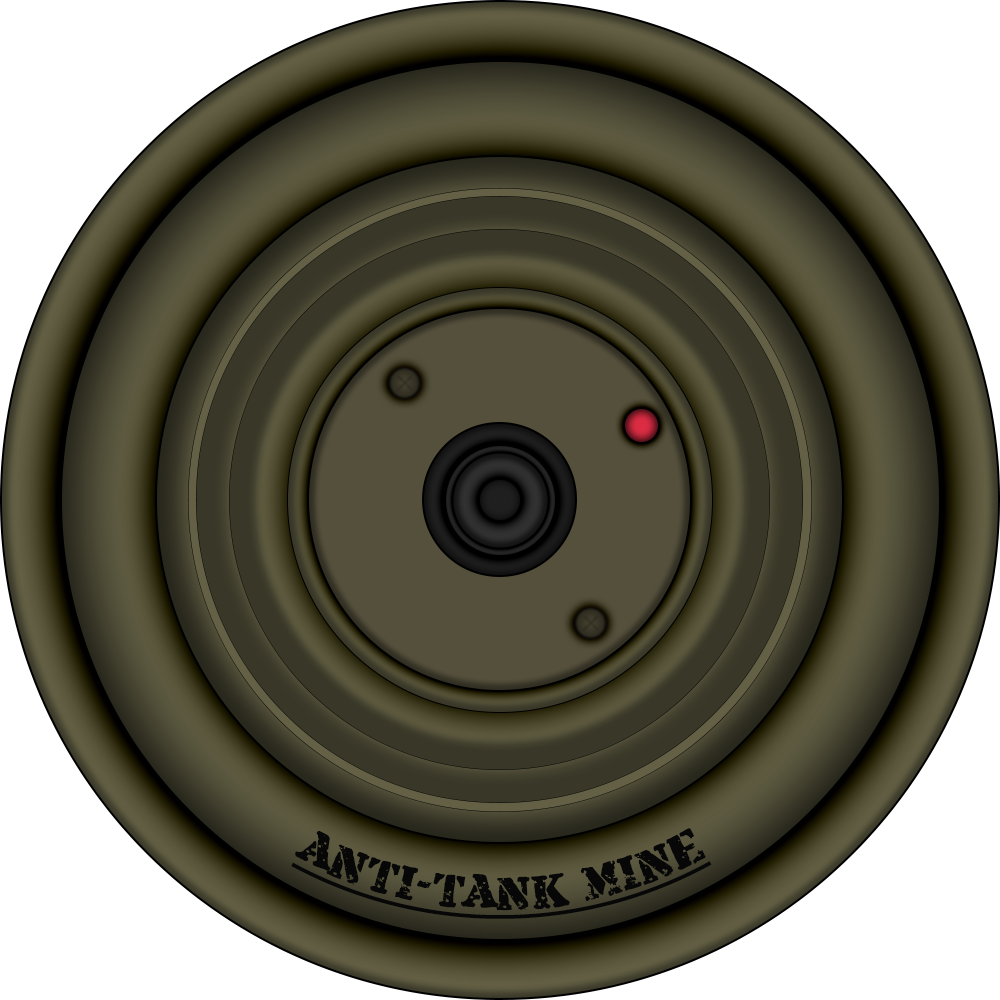
<style>
.page{position:relative;width:1000px;height:1000px;background:#ffffff}
.page>*{position:absolute;margin:0}
.t1{font:48px/56px "ArmaliteRifle";color:#070707;text-decoration:underline}
</style>
<div class="page">
<p class="t1" style="left:291px;top:828px;width:421px;height:91px;text-align:center">ANTI-TANK MINE</p>
</div>
